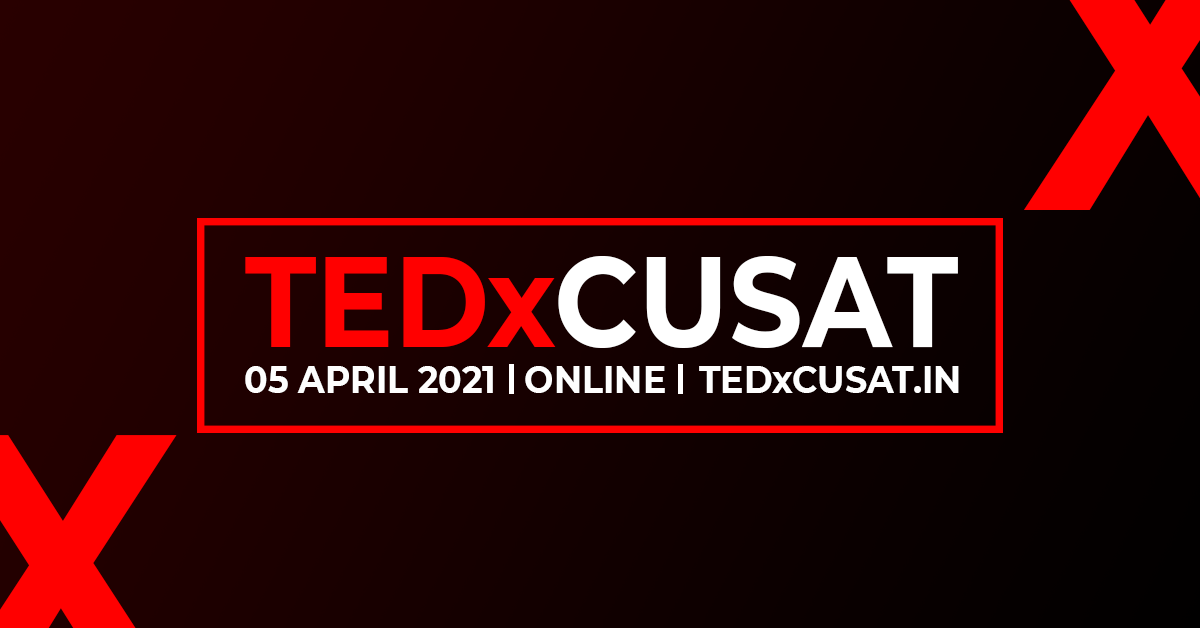
<style>
.page{position:relative;width:1200px;height:628px}
.page>*{position:absolute;margin:0}
.t1{font:128.2px "Montserrat-Bold";color:#ffffff;scale:0.9 1}
.t2{font:128.2px "Montserrat-Bold";color:#ff0000;scale:0.9 1}
.t3{font:38.7px "Montserrat-Bold";color:#fefefe;scale:0.9 1}
.t4{font:38.7px "Montserrat-Bold";color:#fefefe;text-transform:uppercase;scale:0.9 1}
</style>
<div class="page">
<p class="t1" style="left:245px;top:256px;width:713px;height:92px"><span class="t2">TEDx</span>CUSAT</p>
<p class="t3" style="left:245px;top:366px;width:248px;height:27px">05 APRIL 2021</p>
<p class="t3" style="left:525px;top:366px;width:140px;height:27px">ONLINE</p>
<p class="t4" style="left:699px;top:366px;width:260px;height:27px">ted<span class="t3">x</span>cusat<span class="t3">.IN</span></p>
</div>
